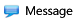
<style>
.page{position:relative;width:80px;height:22px;background:#ffffff}
.page>*{position:absolute;margin:0}
.t1{font:12px "MalgunGothicRegular";color:#060606}
</style>
<div class="page">
<p class="t1" style="left:26px;top:6px;width:47px;height:12px">Message</p>
</div>
